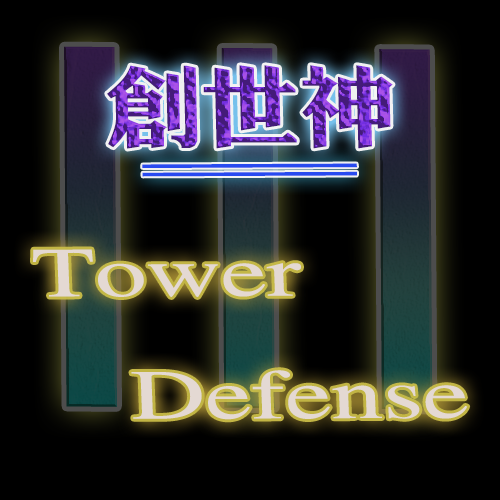
<style>
.page{position:relative;width:500px;height:500px;background:#000000}
.page>*{position:absolute;margin:0}
.t1{font:89.3px "¾­µä´Ö·ÂºÚ Regular";scale:1.09 1}
.t2{font:62.5px "¾­µä´Ö·ÂºÚ Regular";color:#284af0;scale:7.84 1}
.t3{font:70.1px "JQXingKaiJT";color:#e4d9d3;scale:1.47 1}
</style>
<div class="page">
<p class="t1" style="left:107px;top:65px;width:286px;height:84px">创世神</p>
<p class="t2" style="left:142px;top:163px;width:215px;height:14px">=</p>
<p class="t3" style="left:33px;top:249px;width:435px;height:171px;text-align:center">Tower <br>         Defense</p>
</div>
